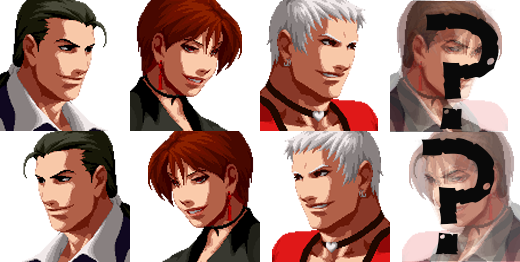
<style>
.page{position:relative;width:520px;height:262px;background:#ffffff}
.page>*{position:absolute;margin:0}
.t1{font:150px "H2mkpB";color:#090909}
</style>
<div class="page">
<p class="t1" style="left:425px;top:13px;width:74px;height:117px">?</p>
<p class="t1" style="left:421px;top:138px;width:74px;height:117px">?</p>
</div>
